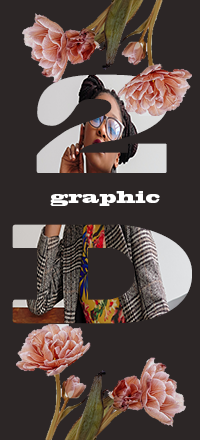
<style>
.page{position:relative;width:200px;height:440px;background:#2c2626}
.page>*{position:absolute;margin:0}
.t1{font:130px/150px "BlackoakStd";scale:0.77 1}
.t2{font:15.9px "BlackoakStd";color:#fefefe;scale:0.75 1}
</style>
<div class="page">
<p class="t1" style="left:12px;top:74px;width:180px;height:250px;text-align:center">2<br>D</p>
<p class="t2" style="left:50px;top:191px;width:110px;height:15px">graphic</p>
</div>
